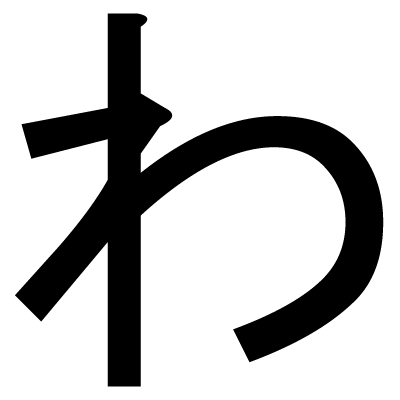
<style>
.page{position:relative;width:400px;height:400px;background:#ffffff}
.page>*{position:absolute;margin:0}
.t1{font:416.7px "MS-PGothic";color:#000000}
</style>
<div class="page">
<p class="t1" style="left:15px;top:13px;width:369px;height:374px">わ</p>
</div>
